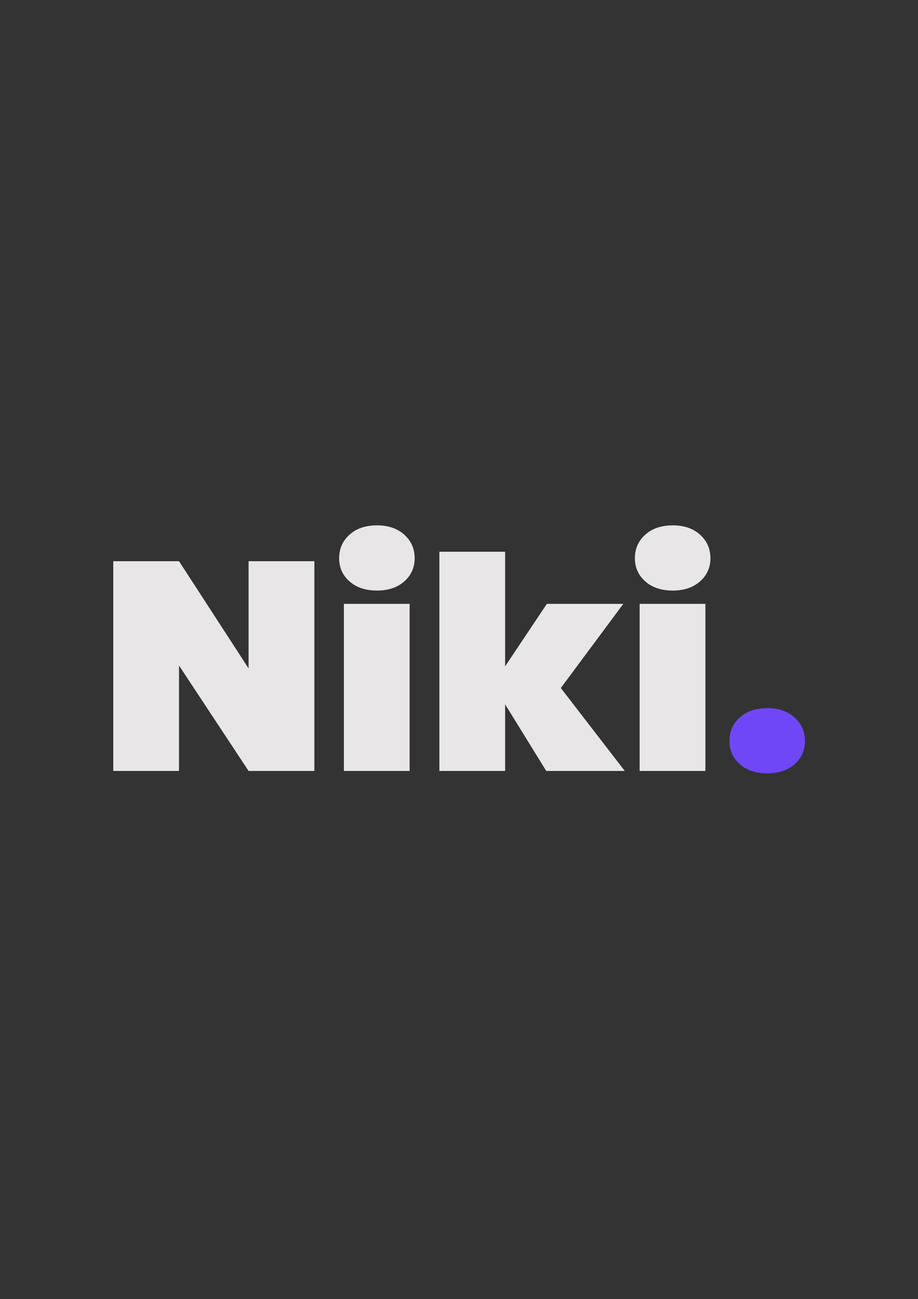
<style>
.page{position:relative;width:918px;height:1299px;background:#333333}
.page>*{position:absolute;margin:0}
.t1{font:296.2px "Poppins-Black";color:#e8e6e6}
.t2{font:296.2px "Poppins-Black";color:#7047f6}
</style>
<div class="page">
<p class="t1" style="left:113px;top:525px;width:692px;height:248px">Niki<span class="t2">.</span></p>
</div>
